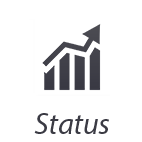
<style>
.page{position:relative;width:142px;height:142px;background:#ffffff}
.page>*{position:absolute;margin:0}
.t1{font:30px "MyriadPro-It";color:#3b3b44}
</style>
<div class="page">
<p class="t1" style="left:34px;top:113px;width:75px;height:21px">Status</p>
</div>
